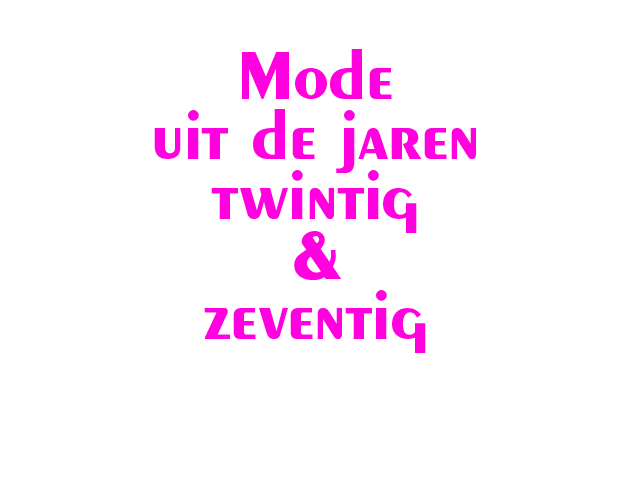
<style>
.page{position:relative;width:640px;height:480px;background:#ffffff}
.page>*{position:absolute;margin:0}
.t1{font:72px/60px "Peignot-Bold";color:#ff00de}
</style>
<div class="page">
<p class="t1" style="left:154px;top:49px;width:322px;height:304px;text-align:center">Mode <br>uit de jaren<br>twintig <br>&amp;<br>zeventig</p>
</div>
